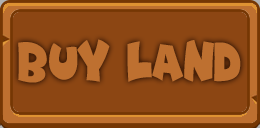
<style>
.page{position:relative;width:260px;height:128px;background:#8c4613}
.page>*{position:absolute;margin:0}
.t1{font:50px "Funny&Cute";color:#be7030}
</style>
<div class="page">
<p class="t1" style="left:18px;top:40px;width:223px;height:44px">buy land</p>
<p class="t1" style="left:18px;top:39px;width:223px;height:44px">buy land</p>
</div>
